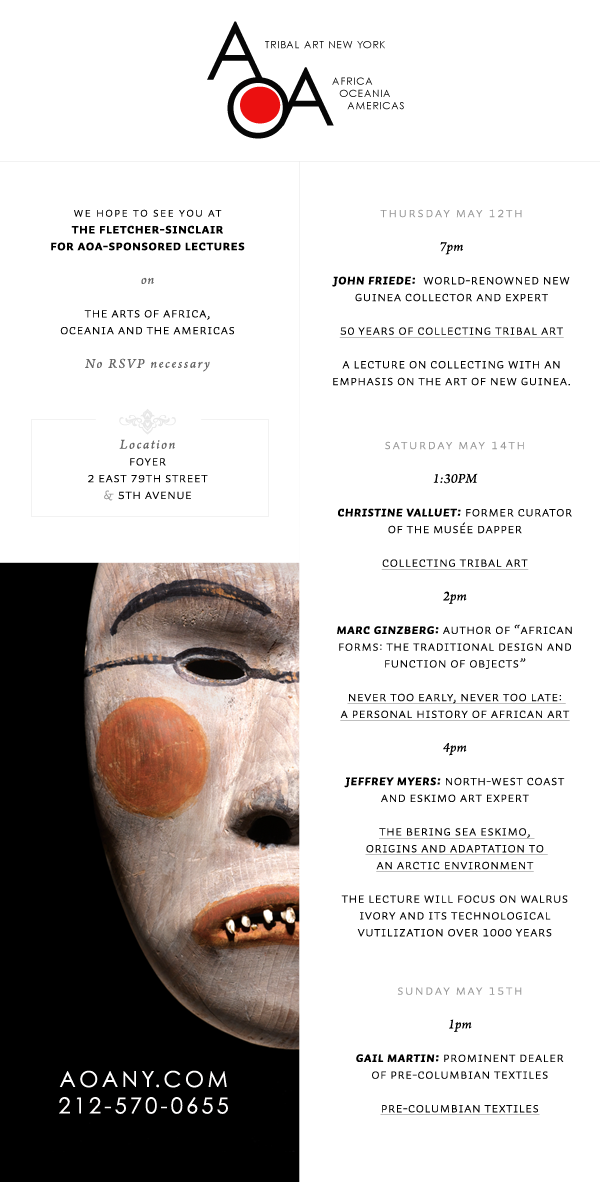
<style>
.page{position:relative;width:600px;height:1182px;background:#ffffff}
.page>*{position:absolute;margin:0}
.t1{font:14px "Auto1-BoldSmCp";letter-spacing:0.02em;color:#000000}
.t2{font:13px "Auto1-LightSmCp";letter-spacing:0.08em;color:#000000}
.t3{font:14px "Auto1-LightSmCp";letter-spacing:0.02em;color:#000000}
.t4{font:14px "ArnoPro-Italic";letter-spacing:0.06em;color:#666666}
.t5{font:14px "ArnoPro-Italic";letter-spacing:0.12em;color:#666666}
.t6{font:26px/16px "NatVignetteTwo";letter-spacing:0.02em;color:#e8e8e8}
.t7{font:26px "NatVignetteTwo";letter-spacing:0.02em;color:#e8e8e8}
.t8{font:14px "Auto1-LightSmCp";letter-spacing:0.02em;color:#999999}
.t9{font:14px "Auto1-LightSmCp";letter-spacing:0.1em;color:#999999}
.t10{font:14px "ArnoPro-Italic";letter-spacing:0.02em;color:#010101}
.t11{font:14px "Auto1-BoldItalicSmCp";letter-spacing:0.02em;color:#000000}
.t12{font:14px "Auto1-LightSmCp";letter-spacing:0.02em;color:#000000;text-decoration:underline}
.t13{font:14px "ArnoPro-Italic";letter-spacing:0.02em;color:#000000}
.t14{font:22px "CenturyGothic";letter-spacing:0.14em;color:#fffefe}
.t15{font:22px "CenturyGothic";letter-spacing:0.16em;color:#fffefe}
</style>
<div class="page">
<p class="t1" style="left:51px;top:209px;width:194px;height:292px;text-align:center"><span class="t2">We hope to see you at <br></span>the Fletcher-Sinclair <br>for AOA-sponsored lectures <br><span class="t3"><br></span><span class="t4">on<br> <br></span><span class="t3">the Arts of Africa, <br>Oceania and the Americas <br> <br></span><span class="t5">No RSVP necessary <br></span><span class="t3"><br></span><span class="t6"><br></span><span class="t7">p<br></span><span class="t5">Location <br></span><span class="t3">Foyer <br>2 East 79th Street <br></span><span class="t8">&amp;</span><span class="t3"> 5th Avenue</span></p>
<p class="t3" style="left:332px;top:209px;width:238px;height:177px;text-align:center"><span class="t9">Thursday May 12th<br><br></span><span class="t10">7pm<br><br></span><span class="t11">John Friede: </span> World-renowned New Guinea Collector and expert <br><br><span class="t12">50 Years of Collecting Tribal Art<br></span><br>A lecture on collecting with an <br>emphasis on the art of New Guinea.</p>
<p class="t3" style="left:337px;top:441px;width:235px;height:496px;text-align:center"><span class="t9">Saturday May 14th <br><br></span><span class="t13">1:30PM<br><br></span><span class="t11">Christine Valluet:</span> Former curator of the Musée Dapper <br><br><span class="t12">Collecting Tribal Art<br><br></span><span class="t13">2pm<br><br></span><span class="t11">Marc Ginzberg:</span> Author of “African Forms: The Traditional Design and Function of Objects” <br><br><span class="t12">Never Too Early, Never Too Late: <br>A Personal History of African Art<br><br></span><span class="t13">4pm<br> <br></span><span class="t11">Jeffrey Myers:</span> North-West Coast and Eskimo art expert <br><br><span class="t12">The Bering Sea Eskimo, <br>Origins and adaptation to <br>an arctic environment<br></span><br>The lecture will focus on Walrus ivory and its technological <br>vutilization over 1000 years</p>
<p class="t3" style="left:356px;top:987px;width:208px;height:128px;text-align:center"><span class="t9"><br><br>Sunday May 15th <br><br></span><span class="t13">1pm <br><br></span><span class="t11">Gail Martin:</span> Prominent Dealer <br>of pre-Columbian Textiles <br><br><span class="t12">Pre-Columbian Textiles</span></p>
<p class="t14" style="left:59px;top:1070px;width:169px;height:44px;text-align:center"><span class="t15">AOANY.COM<br></span>212-570-0655</p>
</div>
